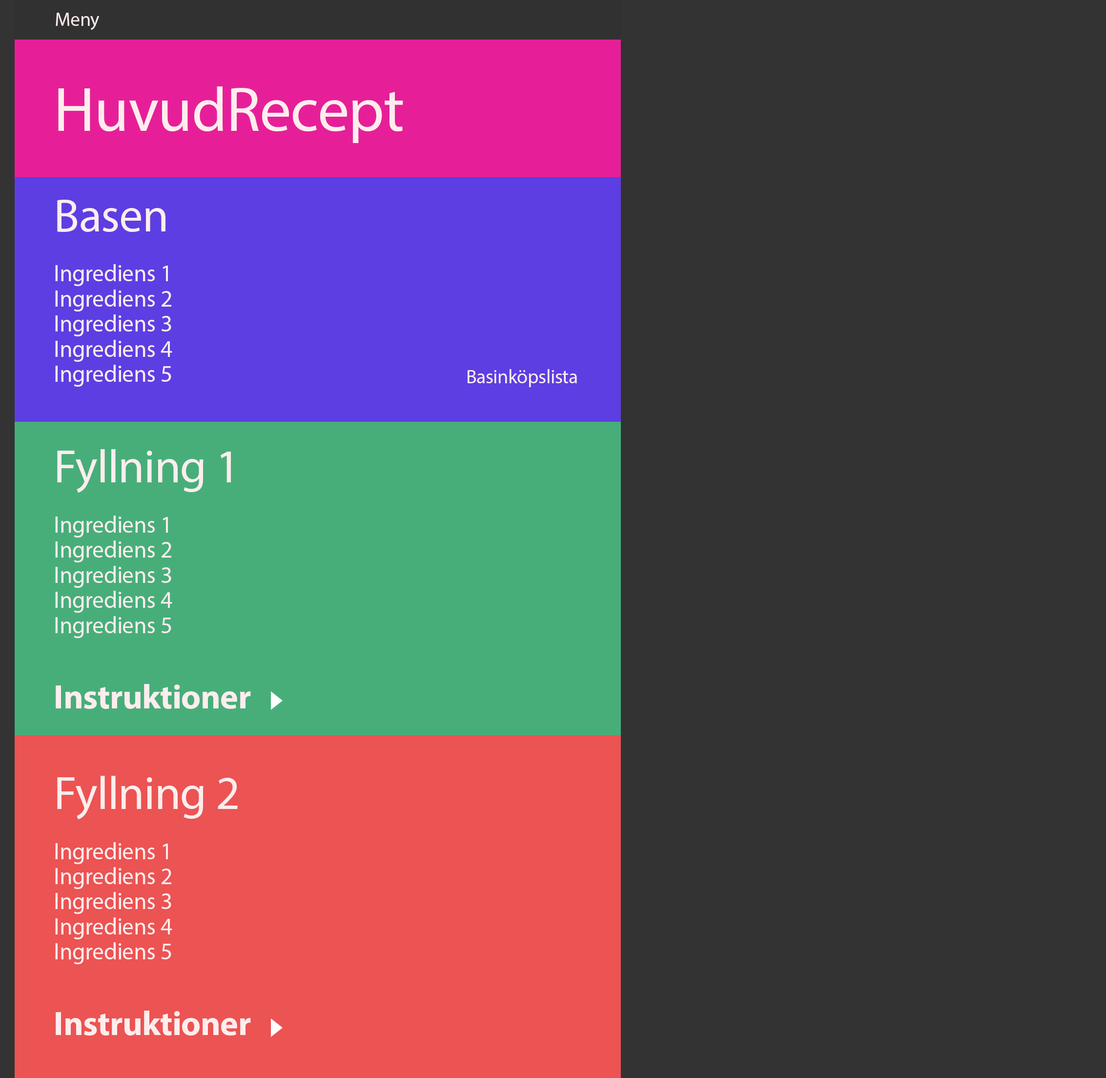
<style>
.page{position:relative;width:1106px;height:1078px;background:#333333}
.page>*{position:absolute;margin:0}
.t1{font:19.5px "MyriadPro-Regular";letter-spacing:-0.01em;color:#feeded}
.t2{font:23.5px/25.1px "MyriadPro-Regular";letter-spacing:-0.01em;color:#feeded}
.t3{font:62.8px/25.1px "MyriadPro-Regular";letter-spacing:-0.01em;color:#feeded}
.t4{font:47.1px/25.1px "MyriadPro-Regular";letter-spacing:-0.01em;color:#feeded}
.t5{font:34.2px/25.1px "MyriadPro-Bold";letter-spacing:-0.01em;color:#feeded}
</style>
<div class="page">
<p class="t1" style="left:56px;top:13px;width:44px;height:17px">Meny</p>
<p class="t2" style="left:55px;top:86px;width:348px;height:949px"><span class="t3">HuvudRecept<br><br><br></span><span class="t4"><br>Basen<br><br></span>Ingrediens 1<br>Ingrediens 2<br>Ingrediens 3<br>Ingrediens 4<br>Ingrediens 5<br><br><br><br><span class="t4">Fyllning 1<br></span><br>Ingrediens 1<br>Ingrediens 2<br>Ingrediens 3<br>Ingrediens 4<br>Ingrediens 5<br><br><br><span class="t5">Instruktioner<br><br><br><br></span><span class="t4">Fyllning 2<br></span><br>Ingrediens 1<br>Ingrediens 2<br>Ingrediens 3<br>Ingrediens 4<br>Ingrediens 5<br><br><br><span class="t5">Instruktioner</span></p>
<p class="t1" style="left:468px;top:369px;width:109px;height:18px">Basinköpslista</p>
</div>
